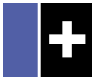
<style>
.page{position:relative;width:95px;height:80px;background:#000000}
.page>*{position:absolute;margin:0}
.t1{font:71.2px "Arial-BoldMT";color:#ffffff}
</style>
<div class="page">
<p class="t1" style="left:49px;top:21px;width:37px;height:37px">+</p>
</div>
